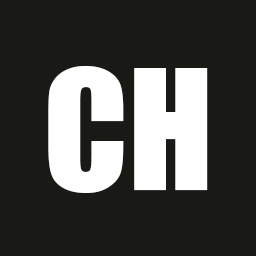
<style>
.page{position:relative;width:256px;height:256px;background:#191a15}
.page>*{position:absolute;margin:0}
.t1{font:154.2px "Impact";color:#ffffff}
</style>
<div class="page">
<p class="t1" style="left:48px;top:66px;width:160px;height:127px">CH</p>
</div>
